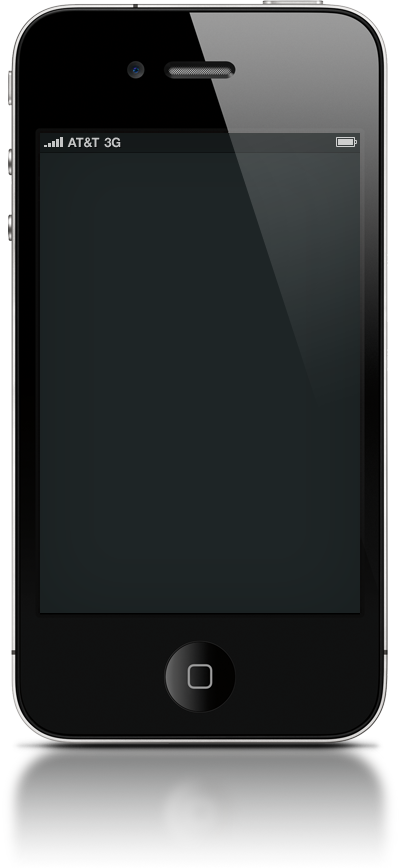
<style>
.page{position:relative;width:399px;height:868px;background:#1e2526}
.page>*{position:absolute;margin:0}
.t1{font:13px "HelveticaNeue-Bold";color:#c4c5c5;text-transform:uppercase}
.t2{font:13px "HelveticaNeue-Bold";color:#c4c5c6;text-transform:uppercase}
</style>
<div class="page">
<p class="t1" style="left:67px;top:137px;width:33px;height:11px">AT&amp;T</p>
<p class="t2" style="left:104px;top:137px;width:17px;height:11px">3G</p>
</div>
